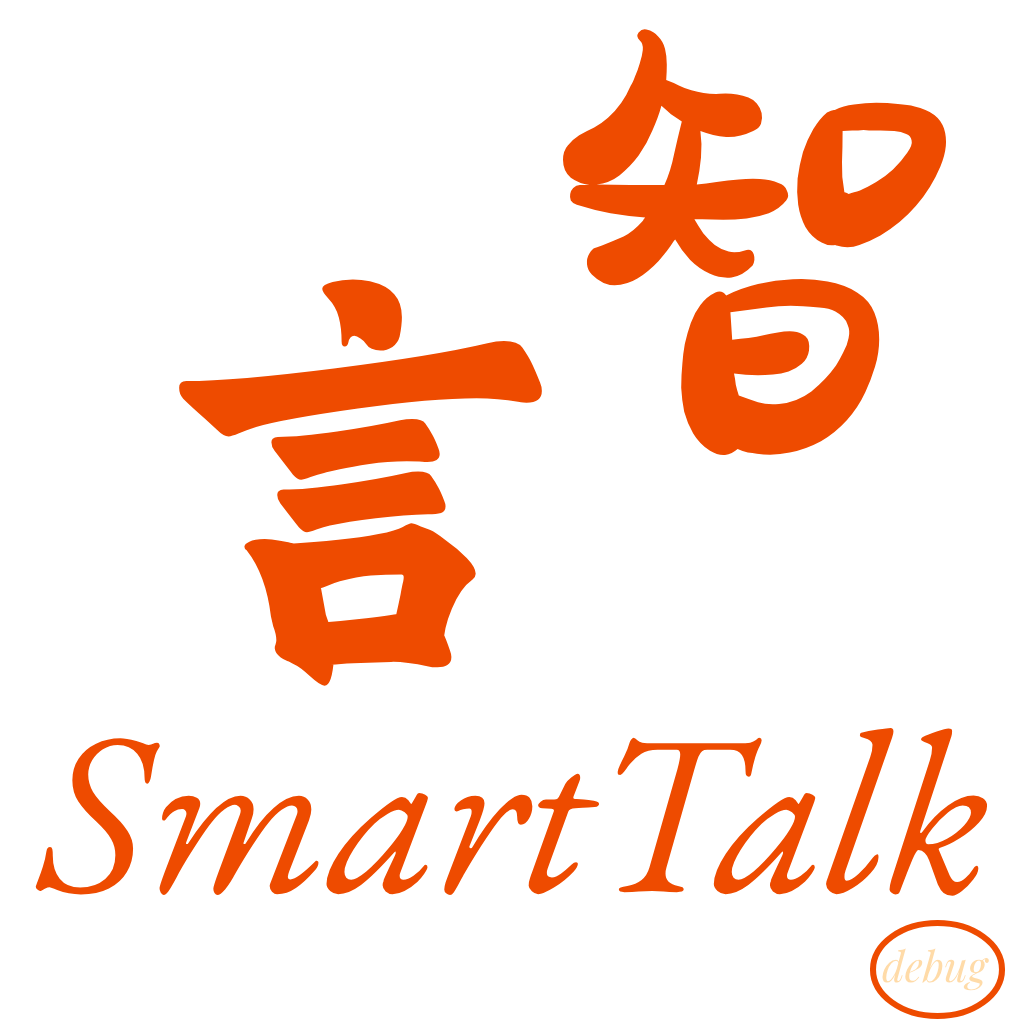
<style>
.page{position:relative;width:1024px;height:1024px;background:#ffffff}
.page>*{position:absolute;margin:0}
.t1{font:600px "HuXiaoBao-SaoBao";color:#ee4b00}
.t2{font:450px "SJbangshujianti-Regular";color:#ee4b00}
.t3{font:230px "EBGaramond-Italic";color:#ee4b00}
.t4{font:42px "PlayfairDisplay-Italic";color:#ffdba8}
</style>
<div class="page">
<p class="t1" style="left:563px;top:28px;width:387px;height:429px">智</p>
<p class="t2" style="left:179px;top:279px;width:363px;height:407px">言</p>
<p class="t3" style="left:35px;top:727px;width:953px;height:169px">SmartTalk</p>
<p class="t4" style="left:882px;top:948px;width:107px;height:43px">debug</p>
</div>
